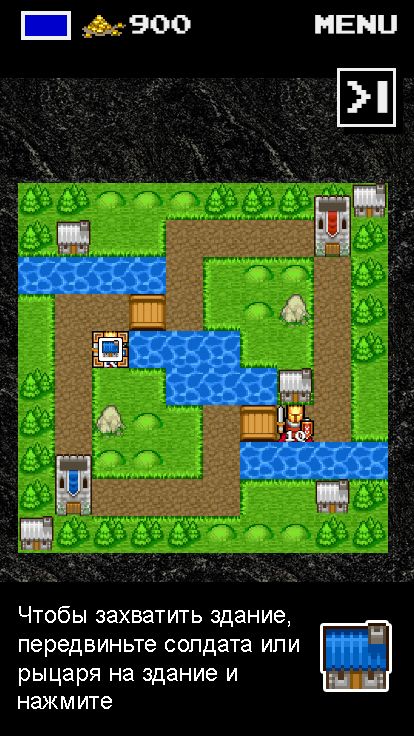
<style>
.page{position:relative;width:414px;height:736px;background:#000000}
.page>*{position:absolute;margin:0}
.t1{font:24px "ArialMT";color:#ffffff}
</style>
<div class="page">
<p class="t1" style="left:18px;top:606px;width:281px;height:103px">Чтобы захватить здание,<br>передвиньте солдата или<br>рыцаря на здание и<br>нажмите</p>
</div>
